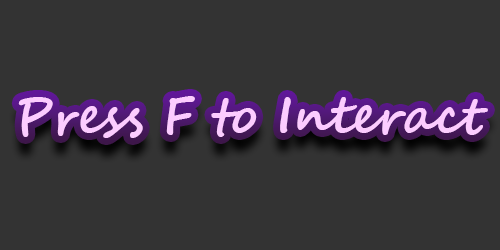
<style>
.page{position:relative;width:500px;height:250px;background:#333333}
.page>*{position:absolute;margin:0}
.t1{font:50px "SegoeScript-Bold";color:#fcccff}
</style>
<div class="page">
<p class="t1" style="left:18px;top:96px;width:470px;height:42px">Press F to Interact</p>
</div>
